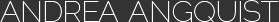
<style>
.page{position:relative;width:279px;height:22px;background:#333333}
.page>*{position:absolute;margin:0}
.t1{font:30px "Raleway-Thin";color:#ffffff;text-transform:uppercase}
</style>
<div class="page">
<p class="t1" style="left:0px;top:0px;width:279px;height:22px">Andrea Angquist</p>
</div>
